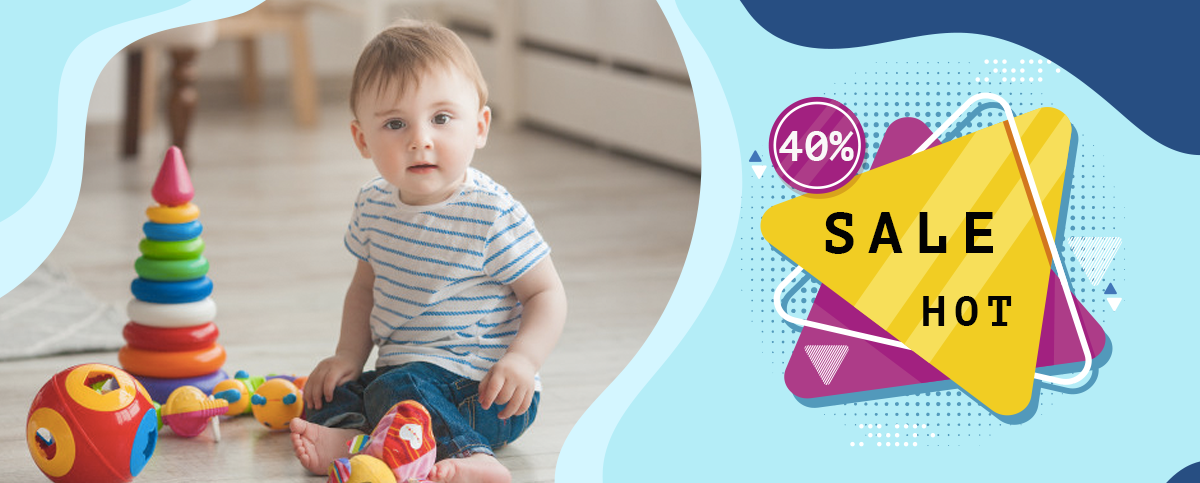
<style>
.page{position:relative;width:1200px;height:483px;background:#b4edf7}
.page>*{position:absolute;margin:0}
.t1{font:41.7px "PTMono-Bold";letter-spacing:0.01em;color:#faf8f8;text-transform:uppercase}
.t2{font:58.3px "PTMono-Bold";letter-spacing:0.2em;color:#020202;text-transform:uppercase}
.t3{font:41.7px "PTMono-Bold";letter-spacing:0.2em;color:#020202;text-transform:uppercase}
</style>
<div class="page">
<p class="t1" style="left:779px;top:131px;width:75px;height:30px">40%</p>
<p class="t2" style="left:825px;top:212px;width:168px;height:42px">sale</p>
<p class="t3" style="left:923px;top:296px;width:89px;height:30px">hot</p>
</div>
